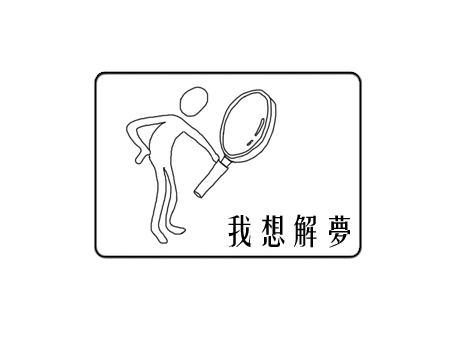
<style>
.page{position:relative;width:450px;height:350px;background:#ffffff}
.page>*{position:absolute;margin:0}
.t1{font:33.3px "FZYTK--GBK1-0";color:#000000}
</style>
<div class="page">
<p class="t1" style="left:228px;top:214px;width:122px;height:34px">我想解夢</p>
</div>
